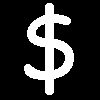
<style>
.page{position:relative;width:100px;height:100px;background:#000000}
.page>*{position:absolute;margin:0}
.t1{font:90px "ComicSansMS";letter-spacing:0.1em;color:#ffffff}
</style>
<div class="page">
<p class="t1" style="left:24px;top:3px;width:50px;height:92px">$</p>
</div>
